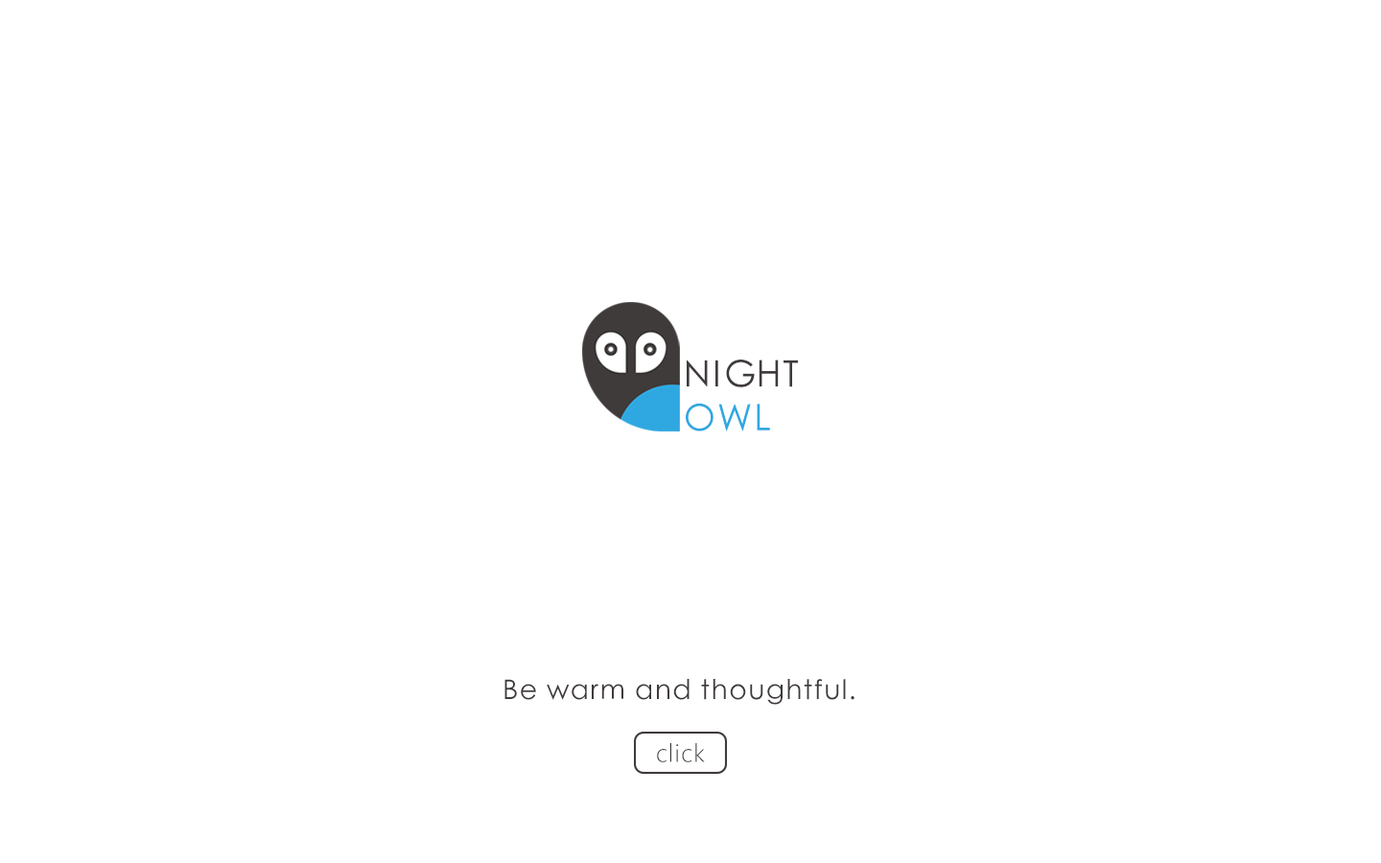
<style>
.page{position:relative;width:1381px;height:863px;background:#ffffff}
.page>*{position:absolute;margin:0}
.t1{font:36.5px "STXihei";letter-spacing:0.05em;color:#3f3b3a}
.t2{font:36.5px "STXihei";letter-spacing:0.05em;color:#2fa8e1}
.t3{font:27.1px "STXihei";letter-spacing:0.05em;color:#3f3b3a}
.t4{font:23.4px "MicrosoftYaHeiLight";letter-spacing:0.05em;color:#3f3b3a}
</style>
<div class="page">
<p class="t1" style="left:686px;top:360px;width:112px;height:72px;text-align:justify">NIGHT <br><span class="t2">OWL</span></p>
<p class="t3" style="left:505px;top:679px;width:350px;height:26px">Be warm and thoughtful.</p>
<p class="t4" style="left:657px;top:743px;width:48px;height:20px">click</p>
</div>
